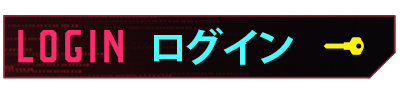
<style>
.page{position:relative;width:400px;height:95px;background:#ffffff}
.page>*{position:absolute;margin:0}
.t1{font:79.1px "Party-Lights-[WLM]-Flat";color:#ff296d}
.t2{font:39.5px "KozGoPr6N-Bold";color:#43ffff}
</style>
<div class="page">
<p class="t1" style="left:18px;top:30px;width:105px;height:33px">LOGIN</p>
<p class="t2" style="left:154px;top:27px;width:139px;height:38px">ログイン</p>
</div>
